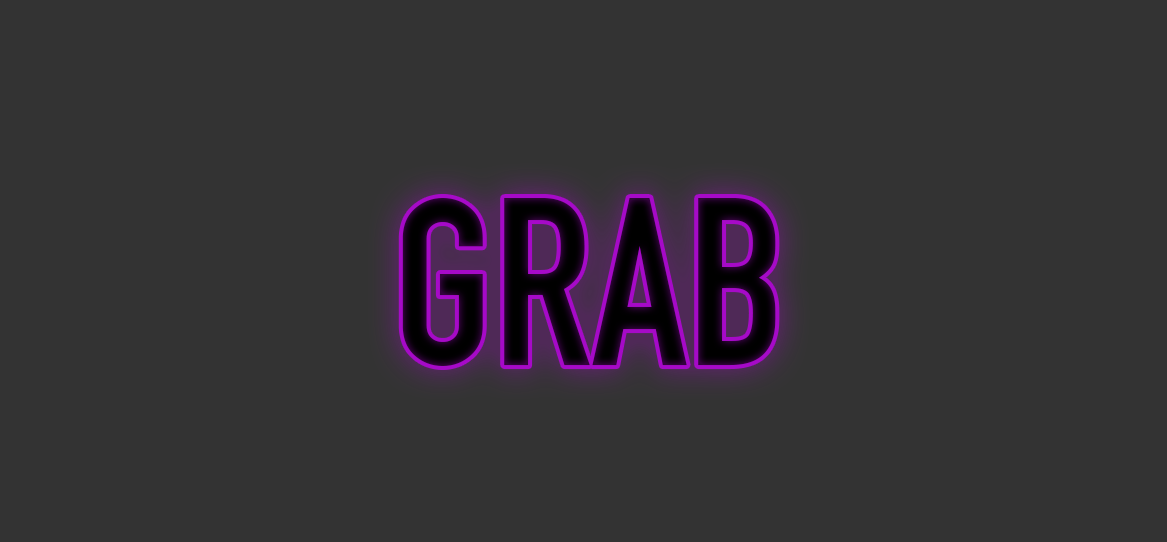
<style>
.page{position:relative;width:1167px;height:542px;background:#333333}
.page>*{position:absolute;margin:0}
.t1{font:233.7px "DINEngschrift";color:#070009}
</style>
<div class="page">
<p class="t1" style="left:402px;top:198px;width:374px;height:168px">GRAB</p>
</div>
